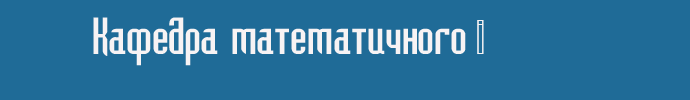
<style>
.page{position:relative;width:690px;height:100px;background:#1f6b97}
.page>*{position:absolute;margin:0}
.t1{font:48px "Bedrock-Cyr-Regular";color:#f7f3f4}
.t2{font:48px "TauernCTT";color:#f7f3f4}
</style>
<div class="page">
<p class="t1" style="left:93px;top:17px;width:391px;height:49px">Кафедра математичного <span class="t2">і </span>функц<span class="t2">і</span>онального анал<span class="t2">і</span>зу</p>
</div>
